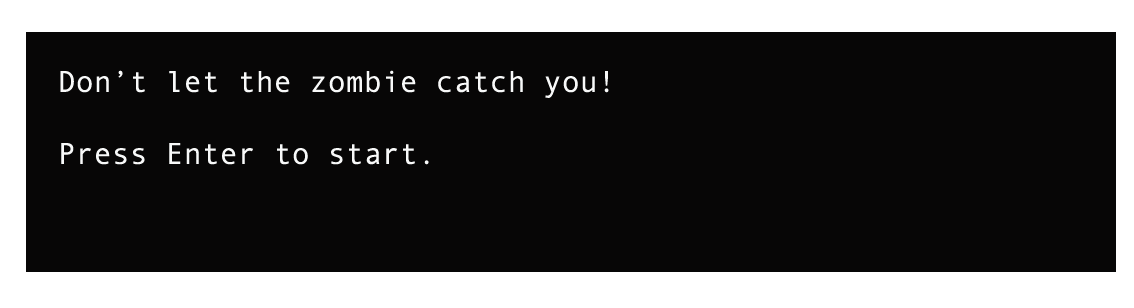
<style>
.page{position:relative;width:1134px;height:308px;background:#070606}
.page>*{position:absolute;margin:0}
.t1{font:30px "AndaleMono";color:#f8f9f9}
</style>
<div class="page">
<p class="t1" style="left:60px;top:70px;width:549px;height:95px">Don’t let the zombie catch you!<br><br>Press Enter to start.</p>
</div>
